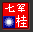
<style>
.page{position:relative;width:33px;height:32px;background:#f20000}
.page>*{position:absolute;margin:0}
.t1{font:10.4px "SimSun";color:#ffffff}
.t2{font:11.7px "SimSun";color:#ffffff}
</style>
<div class="page">
<p class="t1" style="left:5px;top:4px;width:20px;height:8px">七军</p>
<p class="t2" style="left:16px;top:15px;width:11px;height:12px">桂</p>
</div>
